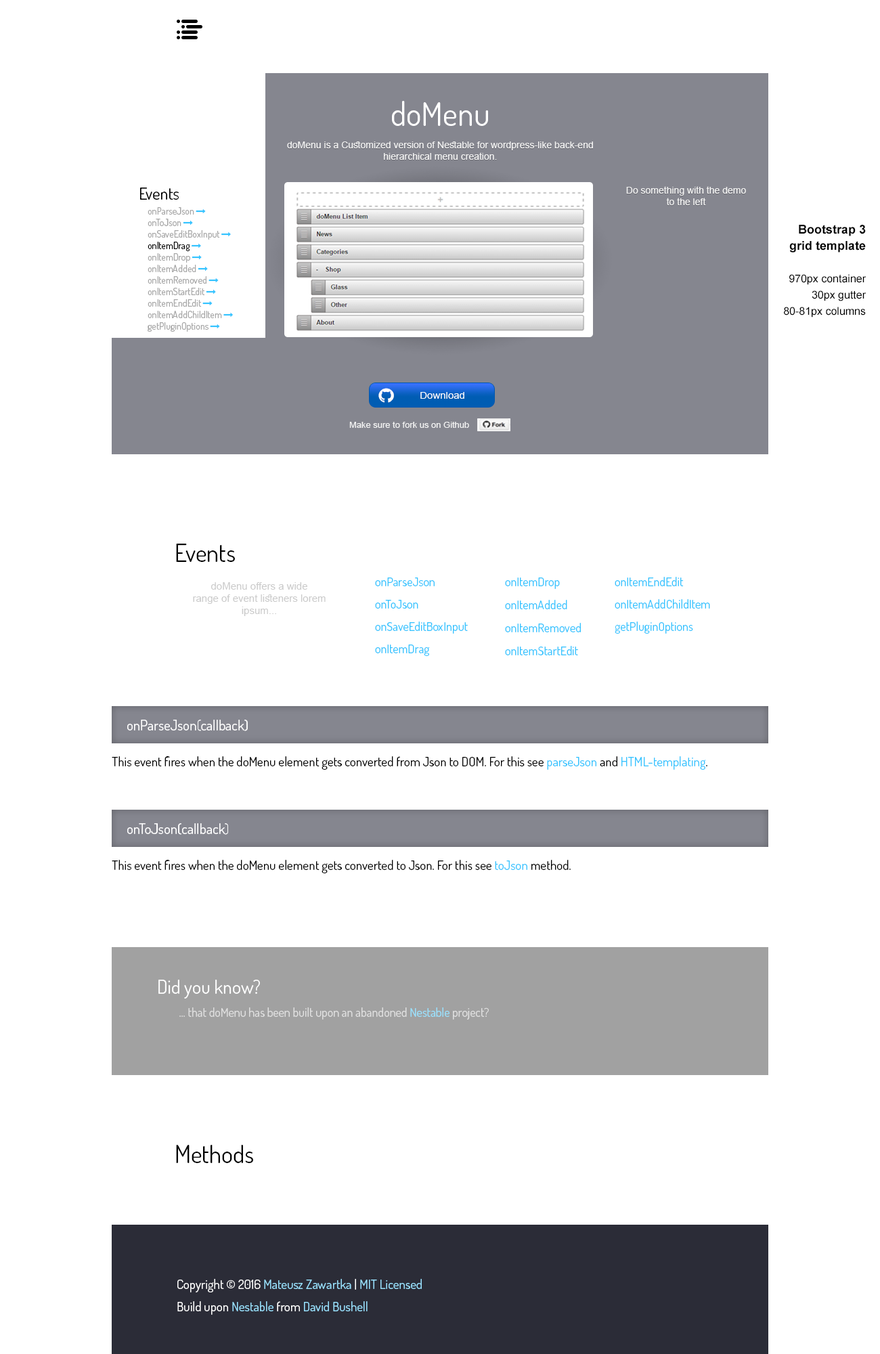
<style>
.page{position:relative;width:880px;height:1354px;background:#ffffff}
.page>*{position:absolute;margin:0}
.t1{font:32.5px "Dosis-Regular";color:#ffffff}
.t2{font:9.5px "ArialMT";color:#f3f3f3}
.t3{font:16.3px "Dosis-Regular";color:#000000}
.t4{font:10.8px/16.3px "ArialMT";color:#000000}
.t5{font:12.2px/16.3px "Arial-BoldMT";color:#000000}
.t6{font:9.5px "ArialMT";color:#ffffff;scale:1.07 1}
.t7{font:8.2px "ArialMT";color:#f3f3f3;scale:1.07 1}
.t8{font:24.4px "Dosis-Regular";color:#000000}
.t9{font:12.2px/22.3px "Dosis-Regular";color:#35c4ff}
.t10{font:12.2px/23px "Dosis-Regular";color:#35c4ff}
.t11{font:10.2px "ArialMT";color:#cacaca}
.t12{font:14.2px "Dosis-Regular";color:#ffffff}
.t13{font:12.9px "Dosis-Regular";color:#000000}
.t14{font:12.9px "Dosis-Regular";color:#35c4ff}
.t15{font:19px "Dosis-Regular";color:#ffffff}
.t16{font:12.2px "Dosis-Regular";color:#e0e0e0}
.t17{font:12.2px "Dosis-Regular";color:#9ae2ff}
.t18{font:12.9px/22.3px "Dosis-Regular";color:#ffffff}
.t19{font:12.9px/22.3px "Dosis-Regular";color:#9ae2ff}
</style>
<div class="page">
<p class="t1" style="left:392px;top:101px;width:96px;height:25px">doMenu</p>
<p class="t2" style="left:287px;top:142px;width:306px;height:18px;text-align:center">doMenu is a Customized version of Nestable for wordpress-like back-end <br>hierarchical menu creation.</p>
<p class="t3" style="left:140px;top:188px;width:39px;height:12px">Events</p>
<p class="t2" style="left:626px;top:186px;width:120px;height:19px;text-align:center">Do something with the demo<br>to the left</p>
<p class="t4" style="left:784px;top:225px;width:83px;height:93px;text-align:right"><span class="t5">Bootstrap 3<br>grid template<br><br></span>970px container<br>30px gutter<br>80-81px columns</p>
<p class="t6" style="left:421px;top:392px;width:44px;height:7px">Download</p>
<p class="t7" style="left:349px;top:422px;width:120px;height:6px">Make sure to fork us on Github</p>
<p class="t8" style="left:176px;top:544px;width:59px;height:18px">Events</p>
<p class="t9" style="left:375px;top:578px;width:93px;height:78px">onParseJson<br>onToJson<br>onSaveEditBoxInput<br>onItemDrag</p>
<p class="t10" style="left:505px;top:578px;width:76px;height:78px">onItemDrop<br>onItemAdded<br>onItemRemoved<br>onItemStartEdit</p>
<p class="t9" style="left:615px;top:577px;width:95px;height:57px">onItemEndEdit<br>onItemAddChildItem<br>getPluginOptions</p>
<p class="t11" style="left:193px;top:582px;width:133px;height:34px;text-align:center">doMenu offers a wide <br>range of event listeners lorem ipsum...</p>
<p class="t12" style="left:127px;top:720px;width:121px;height:11px">onParseJson(callback)</p>
<p class="t13" style="left:112px;top:756px;width:596px;height:14px">This event fires when the doMenu element gets converted from Json to DOM. For this see <span class="t14">parseJson </span>and <span class="t14">HTML-templating</span>.</p>
<p class="t12" style="left:127px;top:824px;width:101px;height:11px">onToJson(callback)</p>
<p class="t13" style="left:112px;top:860px;width:459px;height:14px">This event fires when the doMenu element gets converted to Json. For this see <span class="t14">toJson</span> method.</p>
<p class="t15" style="left:158px;top:980px;width:102px;height:19px">Did you know?</p>
<p class="t16" style="left:179px;top:1008px;width:310px;height:12px">... that doMenu has been built upon an abandoned <span class="t17">Nestable </span>project?</p>
<p class="t8" style="left:176px;top:1145px;width:77px;height:18px">Methods</p>
<p class="t18" style="left:177px;top:1279px;width:245px;height:36px">Copyright © 2016 <span class="t19">Mateusz Zawartka</span> | <span class="t19">MIT Licensed</span> <br>Build upon <span class="t19">Nestable </span>from <span class="t19">David Bushell</span></p>
</div>
